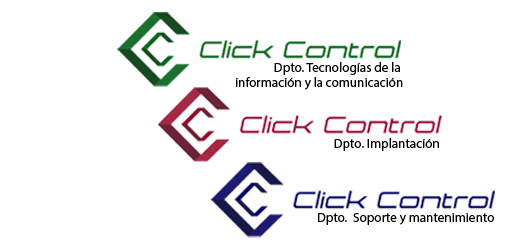
<style>
.page{position:relative;width:512px;height:250px;background:#ffffff}
.page>*{position:absolute;margin:0}
.t1{font:13.2px "MyriadPro-Regular";color:#000000}
</style>
<div class="page">
<p class="t1" style="left:236px;top:62px;width:167px;height:28px;text-align:right">Dpto. Tecnologías de la <br>información y la comunicación</p>
<p class="t1" style="left:334px;top:138px;width:105px;height:13px">Dpto. Implantación</p>
<p class="t1" style="left:318px;top:213px;width:176px;height:12px">Dpto.  Soporte y mantenimiento</p>
</div>
